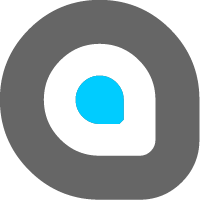
<style>
.page{position:relative;width:200px;height:200px;background:#666666}
.page>*{position:absolute;margin:0}
.t1{font:308px "PicoWhiteAl";color:#666666;font-weight:bold}
</style>
<div class="page">
<p class="t1" style="left:0px;top:0px;width:200px;height:200px">A</p>
</div>
